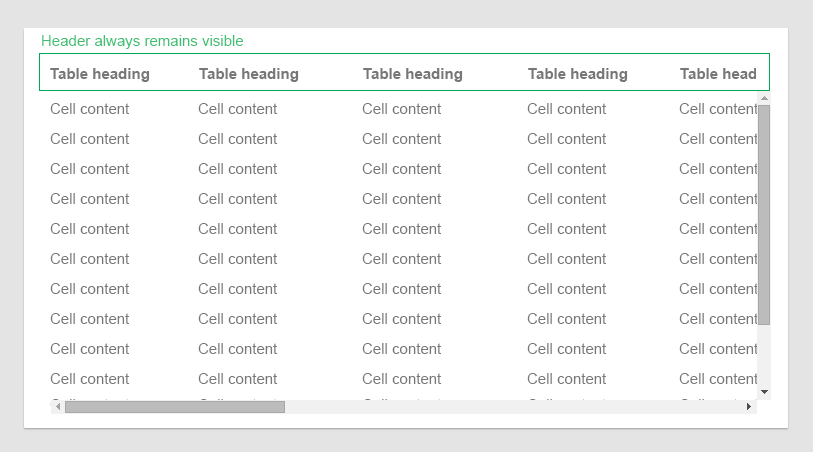
<style>
.page{position:relative;width:813px;height:452px;background:#ffffff}
.page>*{position:absolute;margin:0}
.t1{font:15px "ArialMT";color:#3cc071}
.t2{font:15px "Arial-BoldMT";color:#777777}
.t3{font:15px "ArialMT";color:#777777}
</style>
<div class="page">
<p class="t1" style="left:42px;top:35px;width:201px;height:14px">Header always remains visible</p>
<p class="t2" style="left:50px;top:68px;width:100px;height:14px">Table heading</p>
<p class="t2" style="left:199px;top:68px;width:100px;height:14px">Table heading</p>
<p class="t2" style="left:363px;top:68px;width:100px;height:14px">Table heading</p>
<p class="t2" style="left:528px;top:68px;width:100px;height:14px">Table heading</p>
<p class="t2" style="left:680px;top:68px;width:100px;height:14px">Table heading</p>
<p class="t3" style="left:50px;top:103px;width:80px;height:11px">Cell content</p>
<p class="t3" style="left:198px;top:103px;width:80px;height:11px">Cell content</p>
<p class="t3" style="left:362px;top:103px;width:80px;height:11px">Cell content</p>
<p class="t3" style="left:527px;top:103px;width:80px;height:11px">Cell content</p>
<p class="t3" style="left:679px;top:103px;width:80px;height:11px">Cell content</p>
<p class="t3" style="left:50px;top:133px;width:80px;height:11px">Cell content</p>
<p class="t3" style="left:198px;top:133px;width:80px;height:11px">Cell content</p>
<p class="t3" style="left:362px;top:133px;width:80px;height:11px">Cell content</p>
<p class="t3" style="left:527px;top:133px;width:80px;height:11px">Cell content</p>
<p class="t3" style="left:679px;top:133px;width:80px;height:11px">Cell content</p>
<p class="t3" style="left:50px;top:163px;width:80px;height:11px">Cell content</p>
<p class="t3" style="left:198px;top:163px;width:80px;height:11px">Cell content</p>
<p class="t3" style="left:362px;top:163px;width:80px;height:11px">Cell content</p>
<p class="t3" style="left:527px;top:163px;width:80px;height:11px">Cell content</p>
<p class="t3" style="left:679px;top:163px;width:80px;height:11px">Cell content</p>
<p class="t3" style="left:50px;top:193px;width:80px;height:11px">Cell content</p>
<p class="t3" style="left:198px;top:193px;width:80px;height:11px">Cell content</p>
<p class="t3" style="left:362px;top:193px;width:80px;height:11px">Cell content</p>
<p class="t3" style="left:527px;top:193px;width:80px;height:11px">Cell content</p>
<p class="t3" style="left:679px;top:193px;width:80px;height:11px">Cell content</p>
<p class="t3" style="left:50px;top:223px;width:80px;height:11px">Cell content</p>
<p class="t3" style="left:198px;top:223px;width:80px;height:11px">Cell content</p>
<p class="t3" style="left:362px;top:223px;width:80px;height:11px">Cell content</p>
<p class="t3" style="left:527px;top:223px;width:80px;height:11px">Cell content</p>
<p class="t3" style="left:679px;top:223px;width:80px;height:11px">Cell content</p>
<p class="t3" style="left:50px;top:253px;width:80px;height:11px">Cell content</p>
<p class="t3" style="left:198px;top:253px;width:80px;height:11px">Cell content</p>
<p class="t3" style="left:362px;top:253px;width:80px;height:11px">Cell content</p>
<p class="t3" style="left:527px;top:253px;width:80px;height:11px">Cell content</p>
<p class="t3" style="left:679px;top:253px;width:80px;height:11px">Cell content</p>
<p class="t3" style="left:50px;top:283px;width:80px;height:11px">Cell content</p>
<p class="t3" style="left:198px;top:283px;width:80px;height:11px">Cell content</p>
<p class="t3" style="left:362px;top:283px;width:80px;height:11px">Cell content</p>
<p class="t3" style="left:527px;top:283px;width:80px;height:11px">Cell content</p>
<p class="t3" style="left:679px;top:283px;width:80px;height:11px">Cell content</p>
<p class="t3" style="left:50px;top:313px;width:80px;height:11px">Cell content</p>
<p class="t3" style="left:198px;top:313px;width:80px;height:11px">Cell content</p>
<p class="t3" style="left:362px;top:313px;width:80px;height:11px">Cell content</p>
<p class="t3" style="left:527px;top:313px;width:80px;height:11px">Cell content</p>
<p class="t3" style="left:679px;top:313px;width:80px;height:11px">Cell content</p>
<p class="t3" style="left:50px;top:343px;width:80px;height:11px">Cell content</p>
<p class="t3" style="left:198px;top:343px;width:80px;height:11px">Cell content</p>
<p class="t3" style="left:362px;top:343px;width:80px;height:11px">Cell content</p>
<p class="t3" style="left:527px;top:343px;width:80px;height:11px">Cell content</p>
<p class="t3" style="left:679px;top:343px;width:80px;height:11px">Cell content</p>
<p class="t3" style="left:50px;top:373px;width:80px;height:11px">Cell content</p>
<p class="t3" style="left:198px;top:373px;width:80px;height:11px">Cell content</p>
<p class="t3" style="left:362px;top:373px;width:80px;height:11px">Cell content</p>
<p class="t3" style="left:527px;top:373px;width:80px;height:11px">Cell content</p>
<p class="t3" style="left:679px;top:373px;width:80px;height:11px">Cell content</p>
</div>
